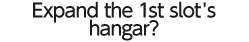
<style>
.page{position:relative;width:249px;height:42px;background:#ffffff}
.page>*{position:absolute;margin:0}
.t1{font:19px/18px "UDShinGoPro-Medium";letter-spacing:-0.04em;color:#1b1b1b}
</style>
<div class="page">
<p class="t1" style="left:33px;top:1px;width:183px;height:40px;text-align:center">Expand the 1st slot's<br>hangar?</p>
</div>
